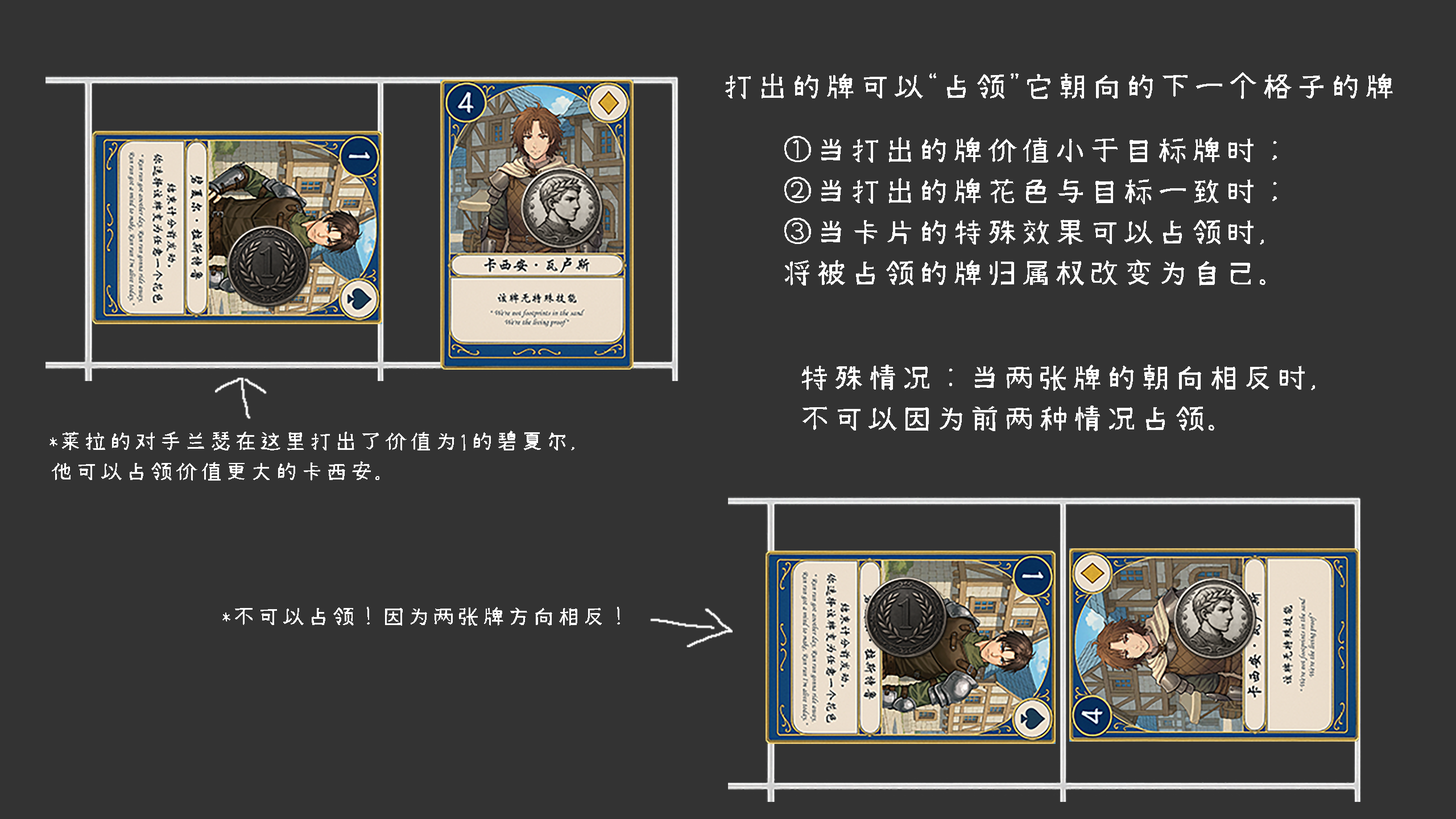
<style>
.page{position:relative;width:1456px;height:819px;background:#333333}
.page>*{position:absolute;margin:0}
.t1{font:34.1px "Xim-Sans-Brahmic";color:#ffffff}
.t2{font:25px "Xim-Sans-Brahmic";color:#ffffff}
</style>
<div class="page">
<p class="t1" style="left:725px;top:72px;width:668px;height:27px">打出的牌可以“占领”它朝向的下一个格子的牌</p>
<p class="t1" style="left:784px;top:136px;width:493px;height:150px">①当打出的牌价值小于目标牌时；<br>②当打出的牌花色与目标一致时；<br>③当卡片的特殊效果可以占领时，<br>将被占领的牌归属权改变为自己。</p>
<p class="t1" style="left:802px;top:365px;width:513px;height:66px">特殊情况：当两张牌的朝向相反时，<br>不可以因为前两种情况占领。</p>
<p class="t2" style="left:49px;top:431px;width:525px;height:50px">*莱拉的对手兰瑟在这里打出了价值为1的碧夏尔，<br>他可以占领价值更大的卡西安。</p>
<p class="t2" style="left:222px;top:607px;width:398px;height:19px">*不可以占领！因为两张牌方向相反！</p>
</div>
